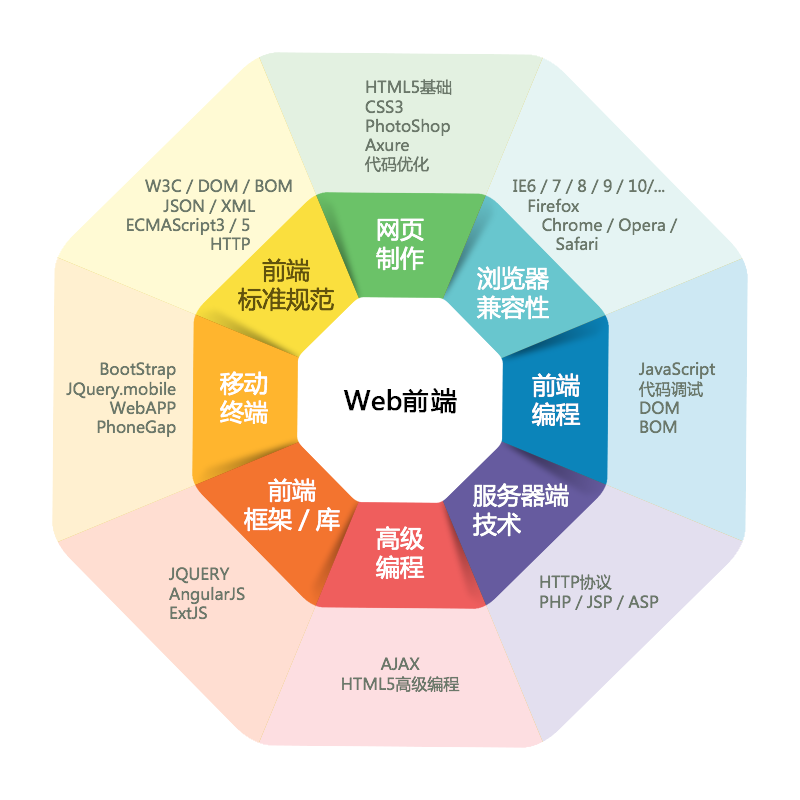
<style>
.page{position:relative;width:800px;height:800px;background:#ffffff}
.page>*{position:absolute;margin:0}
.t1{font:16px "MicrosoftYaHei";color:#6b786a}
.t2{font:24px "MicrosoftYaHei";color:#ffffff}
.t3{font:24px "MicrosoftYaHei";color:#61520d}
.t4{font:26.2px "MicrosoftYaHei";color:#000000;font-weight:bold}
</style>
<div class="page">
<p class="t1" style="left:364px;top:79px;width:88px;height:94px">HTML5基础<br>CSS3<br>PhotoShop<br>Axure<br>代码优化</p>
<p class="t1" style="left:127px;top:179px;width:165px;height:71px;text-align:right">W3C／DOM／BOM<br>JSON／XML        <br>ECMAScript3／5         <br>HTTP</p>
<p class="t1" style="left:513px;top:179px;width:165px;height:72px">IE6／7／8／9／10/...<br>   Firefox<br>      Chrome／Opera／<br>         Safari</p>
<p class="t2" style="left:376px;top:218px;width:48px;height:53px">网页<br>制作</p>
<p class="t3" style="left:238px;top:258px;width:96px;height:54px;text-align:center">前端<br>标准规范</p>
<p class="t2" style="left:476px;top:266px;width:73px;height:54px">浏览器<br>兼容性</p>
<p class="t1" style="left:66px;top:362px;width:110px;height:75px;text-align:right">BootStrap<br>JQuery.mobile<br>WebAPP<br>PhoneGap</p>
<p class="t1" style="left:638px;top:361px;width:78px;height:73px">JavaScript<br>代码调试<br>DOM<br>BOM</p>
<p class="t2" style="left:220px;top:371px;width:48px;height:53px">移动<br>终端</p>
<p class="t2" style="left:531px;top:373px;width:50px;height:54px">前端<br>编程</p>
<p class="t4" style="left:343px;top:388px;width:114px;height:26px">Web前端</p>
<p class="t2" style="left:244px;top:478px;width:96px;height:54px;text-align:center">前端<br>框架／库</p>
<p class="t2" style="left:472px;top:483px;width:97px;height:54px">服务器端<br>技术</p>
<p class="t2" style="left:375px;top:526px;width:50px;height:54px">高级<br>编程</p>
<p class="t1" style="left:168px;top:567px;width:77px;height:53px">JQUERY<br>AngularJS<br>ExtJS</p>
<p class="t1" style="left:540px;top:574px;width:119px;height:36px">HTTP协议<br>PHP／JSP／ASP</p>
<p class="t1" style="left:342px;top:657px;width:118px;height:36px;text-align:center">AJAX<br>HTML5高级编程</p>
</div>
